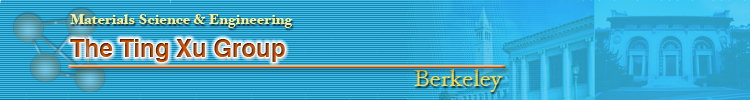
<style>
.page{position:relative;width:750px;height:100px}
.page>*{position:absolute;margin:0}
.t1{font:14px "HoeflerText-Black";color:#f4ef9d}
.t2{font:24px "Helvetica-Bold"}
.t3{font:24px "HoeflerText-Regular";color:#f3d756}
</style>
<div class="page">
<p class="t1" style="left:70px;top:14px;width:223px;height:14px">Materials Science &amp; Engineering</p>
<p class="t2" style="left:70px;top:39px;width:215px;height:23px">The Ting Xu Group</p>
<p class="t3" style="left:414px;top:69px;width:89px;height:23px">Berkeley</p>
</div>
